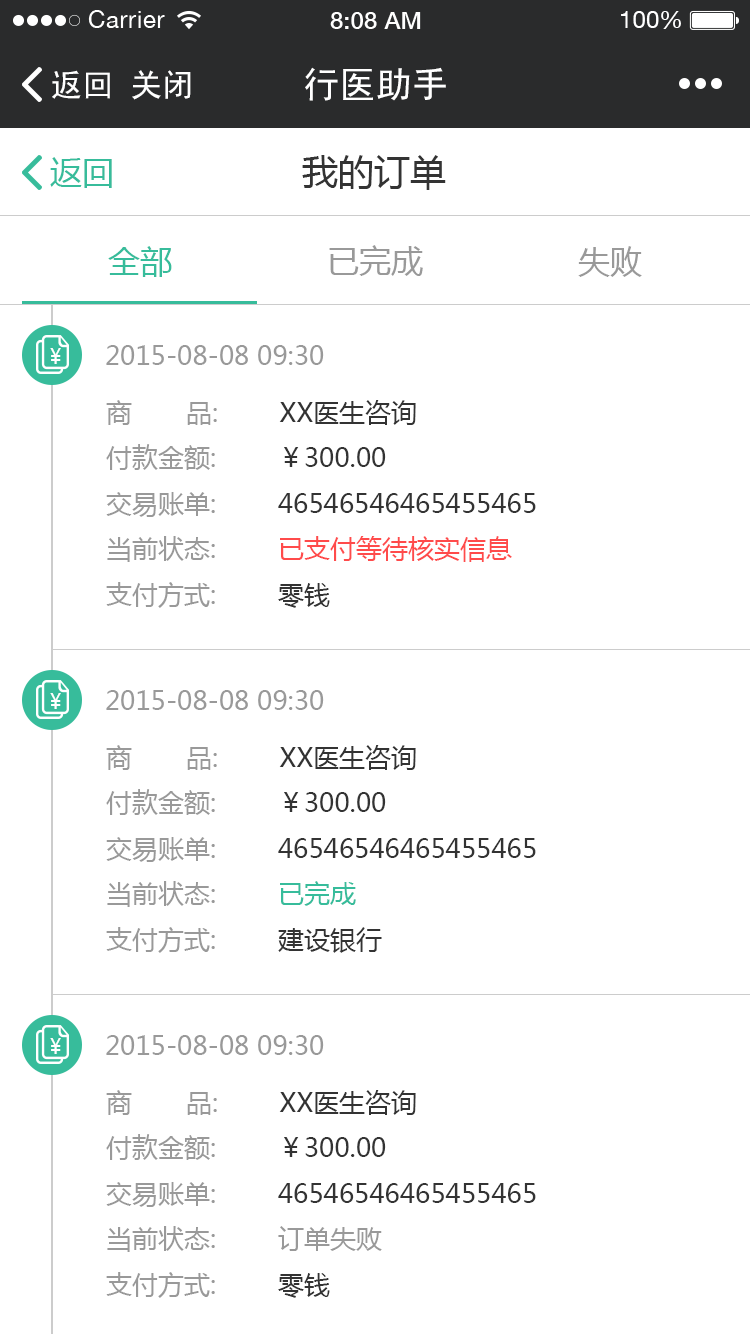
<style>
.page{position:relative;width:750px;height:1334px;background:#ffffff}
.page>*{position:absolute;margin:0}
.t1{font:32px "SimHei";color:#ffffff}
.t2{font:36px "SimHei";color:#ffffff}
.t3{font:32px "MicrosoftYaHei";color:#37bc9b}
.t4{font:36px "MicrosoftYaHei";color:#333333}
.t5{font:32px "MicrosoftYaHei";color:#999999}
.t6{font:20.5px "MicrosoftYaHei";color:#ffffff;scale:0.97 1}
.t7{font:26px "MicrosoftYaHei";color:#999999}
.t8{font:26px "MicrosoftYaHei";color:#333333}
.t9{font:26px "MicrosoftYaHei";color:#ff4b4b}
.t10{font:26px "MicrosoftYaHei";color:#37bc9b}
</style>
<div class="page">
<p class="t1" style="left:52px;top:70px;width:58px;height:29px">返回</p>
<p class="t1" style="left:132px;top:70px;width:59px;height:30px">关闭</p>
<p class="t2" style="left:305px;top:67px;width:141px;height:34px">行医助手</p>
<p class="t3" style="left:50px;top:157px;width:62px;height:31px">返回</p>
<p class="t4" style="left:302px;top:155px;width:144px;height:35px">我的订单</p>
<p class="t3" style="left:108px;top:246px;width:64px;height:31px">全部</p>
<p class="t5" style="left:329px;top:245px;width:94px;height:31px">已完成</p>
<p class="t5" style="left:578px;top:246px;width:64px;height:31px">失败</p>
<p class="t6" style="left:50px;top:348px;width:11px;height:16px">¥</p>
<p class="t7" style="left:106px;top:345px;width:218px;height:20px">2015-08-08 09:30</p>
<p class="t8" style="left:106px;top:400px;width:430px;height:208px"><span class="t7">商       品:        </span>XX医生咨询<br><span class="t7">付款金额:        </span>￥300.00<br><span class="t7">交易账单:        </span>46546546465455465<br><span class="t7">当前状态:        </span><span class="t9">已支付等待核实信息<br></span><span class="t7">支付方式:        </span>零钱</p>
<p class="t6" style="left:50px;top:693px;width:11px;height:16px">¥</p>
<p class="t7" style="left:106px;top:690px;width:218px;height:20px">2015-08-08 09:30</p>
<p class="t8" style="left:106px;top:745px;width:430px;height:208px"><span class="t7">商       品:        </span>XX医生咨询<br><span class="t7">付款金额:        </span>￥300.00<br><span class="t7">交易账单:        </span>46546546465455465<br><span class="t7">当前状态:        </span><span class="t10">已完成<br></span><span class="t7">支付方式:        </span>建设银行</p>
<p class="t6" style="left:50px;top:1038px;width:11px;height:16px">¥</p>
<p class="t7" style="left:106px;top:1035px;width:218px;height:20px">2015-08-08 09:30</p>
<p class="t7" style="left:106px;top:1090px;width:430px;height:208px">商       品:        <span class="t8">XX医生咨询<br></span>付款金额:        <span class="t8">￥300.00<br></span>交易账单:        <span class="t8">46546546465455465<br></span>当前状态:        订单失败<br>支付方式:        <span class="t8">零钱</span></p>
</div>
